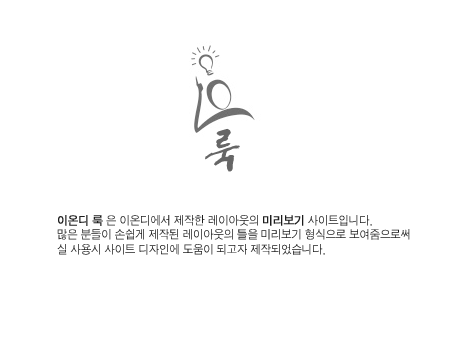
<style>
.page{position:relative;width:454px;height:340px;background:#ffffff}
.page>*{position:absolute;margin:0}
.t1{font:12px "SandJg";color:#1c1c1c;scale:0.95 1}
.t2{font:12px "SandJg";color:#1c1c1c;font-weight:bold;scale:0.95 1}
</style>
<div class="page">
<p class="t1" style="left:57px;top:215px;width:353px;height:40px"><span class="t2">이온디 룩</span> 은 이온디에서 제작한 레이아웃의 <span class="t2">미리보기</span> 사이트입니다.<br>많은 분들이 손쉽게 제작된 레이아웃의 틀을 미리보기 형식으로 보여줌으로써<br>실 사용시 사이트 디자인에 도움이 되고자 제작되었습니다.</p>
</div>
